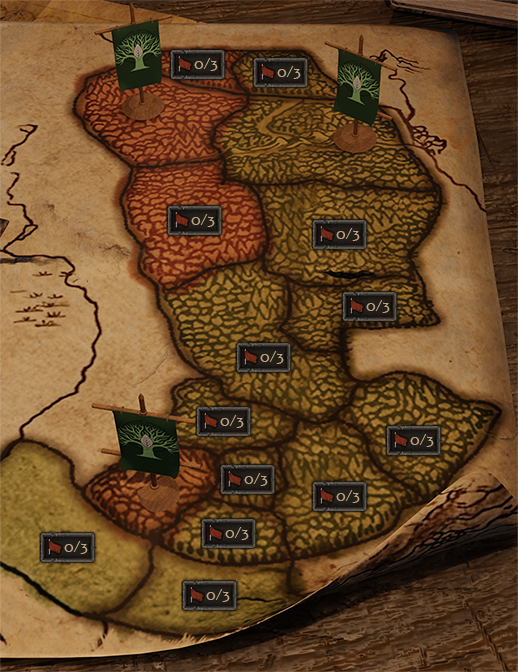
<style>
.page{position:relative;width:518px;height:672px}
.page>*{position:absolute;margin:0}
.t1{font:16px "Alef-Regular";letter-spacing:-0.075em;color:#c2a180}
</style>
<div class="page">
<p class="t1" style="left:194px;top:58px;width:24px;height:13px">0/3</p>
<p class="t1" style="left:277px;top:66px;width:24px;height:13px">0/3</p>
<p class="t1" style="left:191px;top:214px;width:24px;height:13px">0/3</p>
<p class="t1" style="left:336px;top:228px;width:24px;height:13px">0/3</p>
<p class="t1" style="left:366px;top:300px;width:24px;height:13px">0/3</p>
<p class="t1" style="left:260px;top:351px;width:24px;height:13px">0/3</p>
<p class="t1" style="left:220px;top:415px;width:24px;height:13px">0/3</p>
<p class="t1" style="left:410px;top:434px;width:24px;height:13px">0/3</p>
<p class="t1" style="left:244px;top:473px;width:24px;height:13px">0/3</p>
<p class="t1" style="left:336px;top:490px;width:24px;height:13px">0/3</p>
<p class="t1" style="left:225px;top:527px;width:24px;height:13px">0/3</p>
<p class="t1" style="left:64px;top:541px;width:24px;height:13px">0/3</p>
<p class="t1" style="left:206px;top:589px;width:24px;height:13px">0/3</p>
</div>
